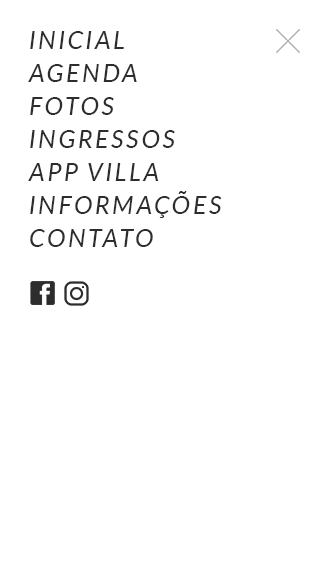
<style>
.page{position:relative;width:320px;height:564px;background:#ffffff}
.page>*{position:absolute;margin:0}
.t1{font:25px "Lato-Italic";letter-spacing:0.1em;color:#2d2d2d;text-transform:uppercase}
</style>
<div class="page">
<p class="t1" style="left:30px;top:31px;width:94px;height:18px">INICIAL</p>
<p class="t1" style="left:28px;top:64px;width:109px;height:18px">AGENDA</p>
<p class="t1" style="left:30px;top:97px;width:84px;height:18px">FOTOS</p>
<p class="t1" style="left:30px;top:130px;width:145px;height:18px">INGRESSOS</p>
<p class="t1" style="left:28px;top:163px;width:131px;height:18px">APP VILLA</p>
<p class="t1" style="left:30px;top:191px;width:192px;height:27px">INFORMAÇÕES</p>
<p class="t1" style="left:30px;top:229px;width:123px;height:18px">contato</p>
</div>
